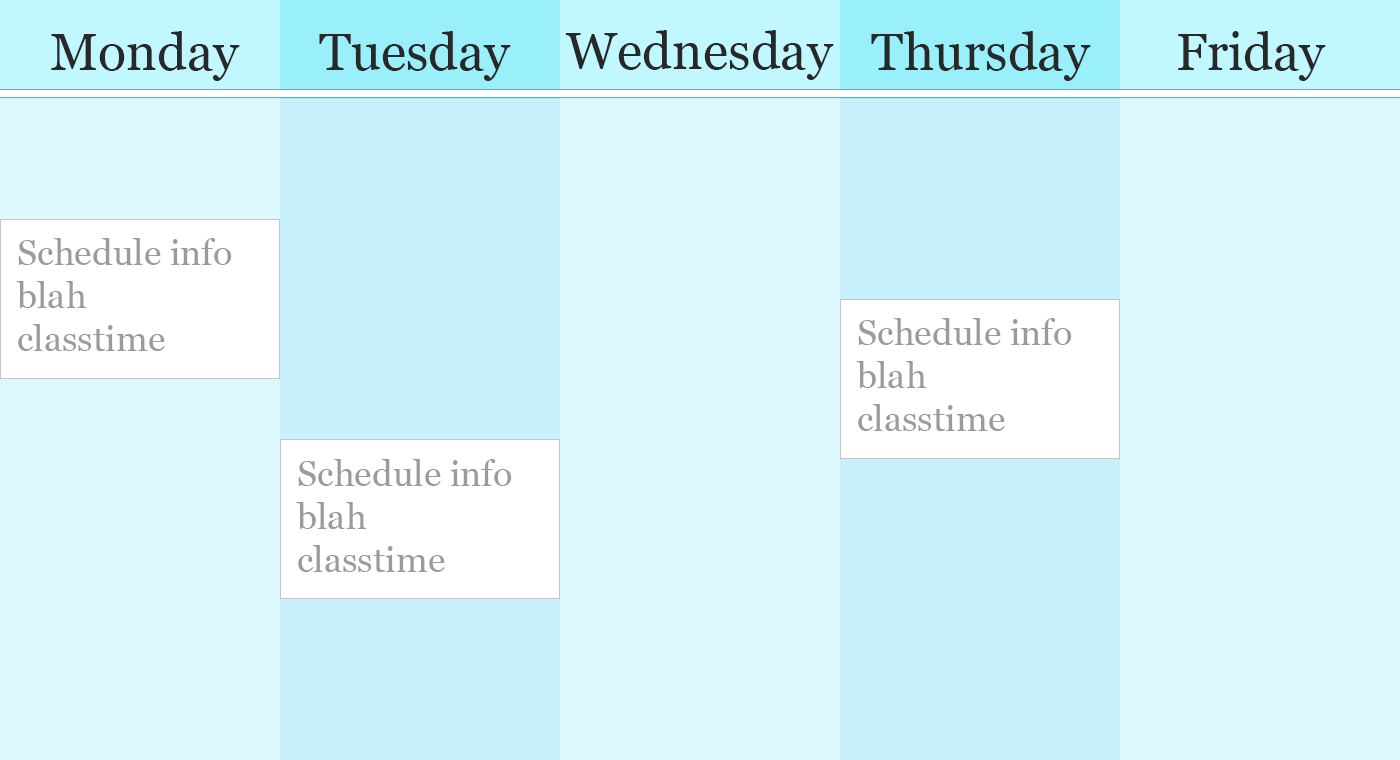
<style>
.page{position:relative;width:1400px;height:760px;background:#def8ff}
.page>*{position:absolute;margin:0}
.t1{font:52px "Georgia";color:#282828}
.t2{font:36px "Georgia";color:#989c9c}
</style>
<div class="page">
<p class="t1" style="left:565px;top:30px;width:269px;height:50px">Wednesday</p>
<p class="t1" style="left:51px;top:31px;width:189px;height:50px">Monday</p>
<p class="t1" style="left:319px;top:31px;width:192px;height:50px">Tuesday</p>
<p class="t1" style="left:871px;top:31px;width:220px;height:50px">Thursday</p>
<p class="t1" style="left:1178px;top:31px;width:148px;height:50px">Friday</p>
<p class="t2" style="left:16px;top:238px;width:216px;height:113px">Schedule info <br>blah<br>classtime</p>
<p class="t2" style="left:856px;top:318px;width:216px;height:113px">Schedule info <br>blah<br>classtime</p>
<p class="t2" style="left:296px;top:459px;width:216px;height:113px">Schedule info <br>blah<br>classtime</p>
</div>
